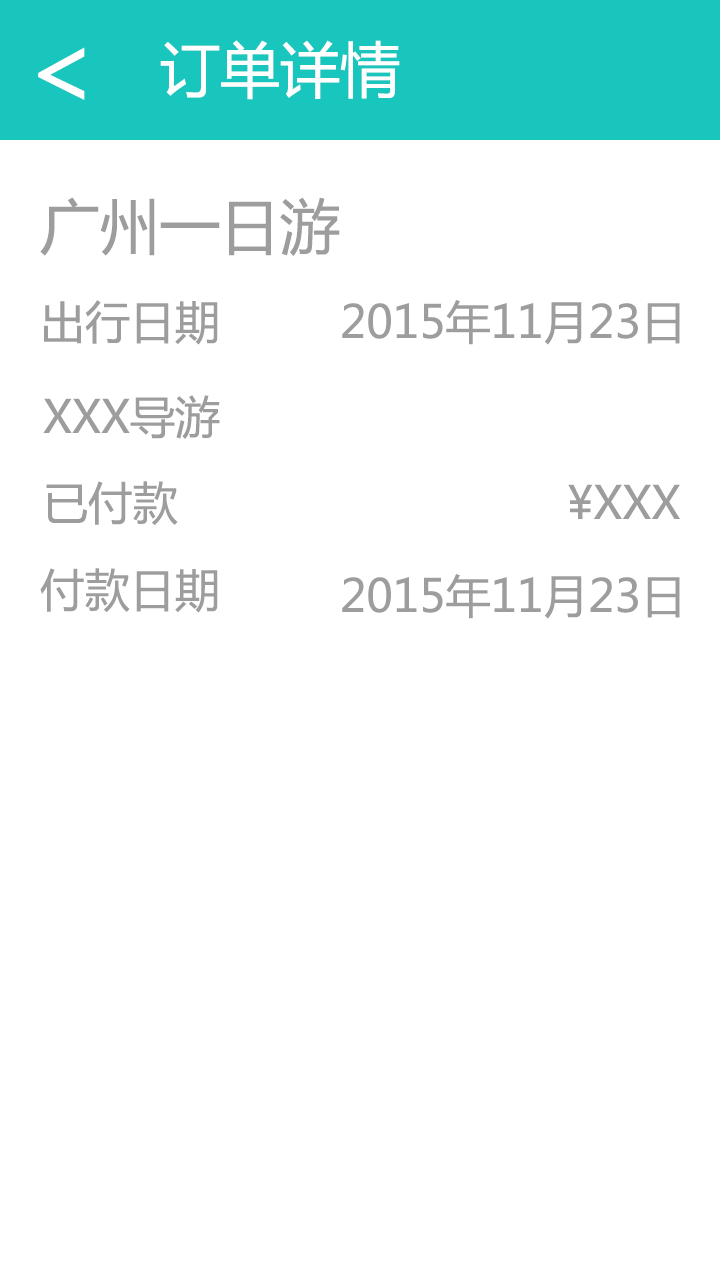
<style>
.page{position:relative;width:720px;height:1280px;background:#ffffff}
.page>*{position:absolute;margin:0}
.t1{font:60px "MicrosoftYaHei";color:#ffffff}
.t2{font:60px "MicrosoftYaHei";color:#9d9d9d}
.t3{font:45px "MicrosoftYaHei";color:#9d9d9d}
</style>
<div class="page">
<p class="t1" style="left:160px;top:40px;width:240px;height:60px">订单详情</p>
<p class="t2" style="left:40px;top:197px;width:300px;height:59px">广州一日游</p>
<p class="t3" style="left:44px;top:300px;width:174px;height:45px">出行日期</p>
<p class="t3" style="left:342px;top:300px;width:338px;height:45px">2015年11月23日</p>
<p class="t3" style="left:43px;top:395px;width:177px;height:44px">XXX导游</p>
<p class="t3" style="left:46px;top:481px;width:132px;height:44px">已付款</p>
<p class="t3" style="left:568px;top:484px;width:112px;height:35px">¥XXX</p>
<p class="t3" style="left:40px;top:568px;width:178px;height:45px">付款日期</p>
<p class="t3" style="left:342px;top:574px;width:338px;height:45px">2015年11月23日</p>
</div>
